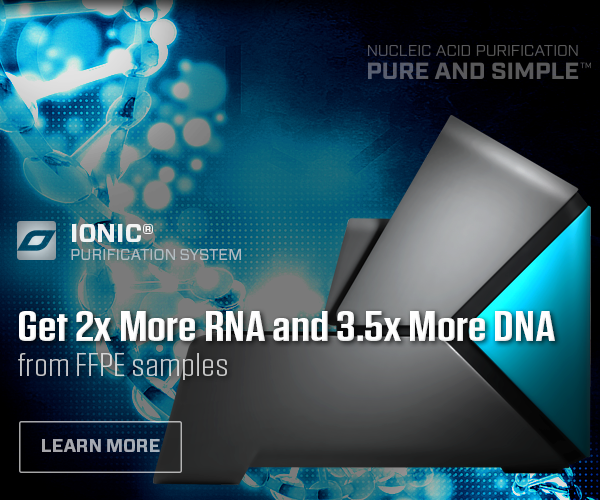
<style>
.page{position:relative;width:600px;height:500px}
.page>*{position:absolute;margin:0}
.t1{font:16px/18px "Forza-Book";letter-spacing:-0.01em;color:#b9c2c8;text-transform:uppercase}
.t2{font:26px/18px "Forza-Bold";letter-spacing:-0.01em;color:#ffffff;text-transform:uppercase}
.t3{font:42px "Tungsten-Semibold";color:#ffffff;scale:1.31 1}
.t4{font:32px "Tungsten-Light";color:#c2c7ca;scale:1.35 1}
.t5{font:17.9px "Forza-Bold";letter-spacing:-0.01em;color:#a6a9b3;text-transform:uppercase}
</style>
<div class="page">
<p class="t1" style="left:71px;top:224px;width:170px;height:36px;opacity:0.9"><span class="t2">Ionic®<br></span>Purification System</p>
<p class="t3" style="left:19px;top:311px;width:536px;height:30px">Get 2x More RNA and 3.5x More DNA</p>
<p class="t4" style="left:18px;top:353px;width:209px;height:27px">from FFPE samples</p>
<p class="t5" style="left:42px;top:439px;width:118px;height:13px">Learn More</p>
</div>
